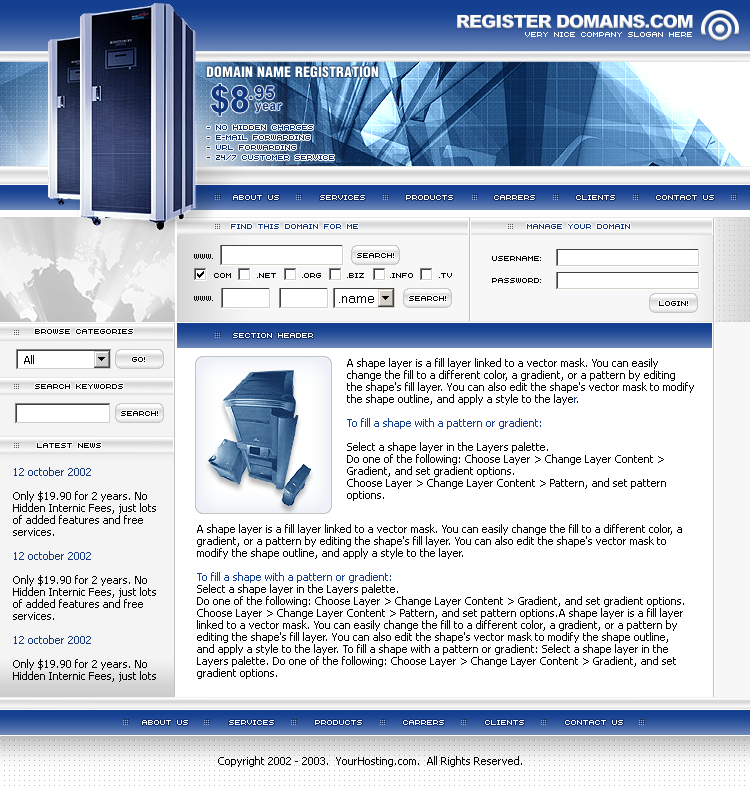
<style>
.page{position:relative;width:750px;height:788px;background:#ffffff}
.page>*{position:absolute;margin:0}
.t1{font:18px "Arial-Black";letter-spacing:-0.05em;color:#ffffff;text-transform:uppercase}
.t2{font:10px "AuXDotBitC";letter-spacing:-0.1em;color:#ffffff;text-transform:uppercase}
.t3{font:14px "Helvetica-Condensed-Black";color:#ffffff;text-transform:uppercase}
.t4{font:36px "Arial-BoldMT";letter-spacing:-0.025em;color:#12377e}
.t5{font:18px "Arial-BoldMT";letter-spacing:0.05em;color:#12377e}
.t6{font:12px "Arial-BoldMT";color:#12377e}
.t7{font:10px/10px "AuXDotBitC";letter-spacing:-0.1em;color:#0a2c6a;text-transform:uppercase}
.t8{font:10px "AuXDotBitC";letter-spacing:-0.1em;color:#12377e;text-transform:uppercase}
.t9{font:10px "AuXDotBitC";letter-spacing:-0.1em;color:#000000;text-transform:uppercase}
.t10{font:10px/22px "AuXDotBitC";letter-spacing:-0.1em;color:#000000;text-transform:uppercase}
.t11{font:11px "Tahoma";color:#000000}
.t12{font:11px/12px "Tahoma";color:#000000}
.t13{font:11px/12px "Tahoma";color:#154091}
.t14{font:11px/12px "Tahoma";color:#143f91}
.t15{font:11px/12px "Tahoma";color:#12377e}
.t16{font:11px/12px "Tahoma";color:#0a4155}
</style>
<div class="page">
<p class="t1" style="left:457px;top:14px;width:236px;height:15px">register domains.com</p>
<p class="t2" style="left:525px;top:32px;width:167px;height:5px">very nice company slogan here</p>
<p class="t3" style="left:206px;top:66px;width:173px;height:12px">domain name registration</p>
<p class="t4" style="left:211px;top:84px;width:38px;height:32px">$8</p>
<p class="t5" style="left:249px;top:86px;width:25px;height:14px">.95</p>
<p class="t6" style="left:255px;top:103px;width:27px;height:10px">year</p>
<p class="t7" style="left:207px;top:125px;width:127px;height:35px">- No hidden charges<br>- E-mail Forwarding<br>- URL Forwarding<br>- 24/7 Customer Service</p>
<p class="t2" style="left:233px;top:195px;width:481px;height:5px">ABOUT US        SERVICES        PRODUCTS        CARRERS        CLIENTS        CONTACT US</p>
<p class="t8" style="left:231px;top:224px;width:127px;height:5px">find this domain for me</p>
<p class="t8" style="left:527px;top:224px;width:103px;height:5px">manage your domain</p>
<p class="t9" style="left:194px;top:254px;width:19px;height:5px">www.</p>
<p class="t9" style="left:357px;top:253px;width:37px;height:5px">search!</p>
<p class="t10" style="left:492px;top:256px;width:49px;height:27px">username:<br>password:</p>
<p class="t9" style="left:212px;top:273px;width:240px;height:5px"><span class="t2">.</span>com     .net     .org     .biz     .info     .tv</p>
<p class="t9" style="left:194px;top:296px;width:19px;height:5px">www.</p>
<p class="t9" style="left:409px;top:296px;width:37px;height:5px">search!</p>
<p class="t9" style="left:659px;top:301px;width:29px;height:5px">LOGIN!</p>
<p class="t9" style="left:35px;top:329px;width:98px;height:5px">browse categories</p>
<p class="t2" style="left:233px;top:333px;width:80px;height:5px">section header</p>
<p class="t11" style="left:24px;top:355px;width:10px;height:9px">All</p>
<p class="t9" style="left:132px;top:357px;width:13px;height:5px">go!</p>
<p class="t12" style="left:347px;top:358px;width:347px;height:143px">A shape layer is a fill layer linked to a vector mask. You can easily change the fill to a different color, a gradient, or a pattern by editing the shape's fill layer. You can also edit the shape's vector mask to modify the shape outline, and apply a style to the laye<span class="t13">r</span>. <br><span class="t14"><br>To fill a shape with a pattern or gradient:<br></span><br>Select a shape layer in the Layers palette.<br>Do one of the following: Choose Layer &gt; Change Layer Content &gt; Gradient, and set gradient options.<br>Choose Layer &gt; Change Layer Content &gt; Pattern, and set pattern options.</p>
<p class="t9" style="left:35px;top:384px;width:88px;height:5px">search keywords</p>
<p class="t9" style="left:121px;top:411px;width:37px;height:5px">search!</p>
<p class="t9" style="left:37px;top:443px;width:64px;height:5px">latest news</p>
<p class="t12" style="left:13px;top:467px;width:143px;height:215px"><span class="t15">12 october 2002<br></span><br>Only $19.90 for 2 years. No Hidden Internic Fees, just lots of added features and free services. <br><br><span class="t15">12 october 2002<br></span><br>Only $19.90 for 2 years. No Hidden Internic Fees, just lots of added features and free services. <br><br><span class="t15">12 october 2002<br></span><br>Only $19.90 for 2 years. No Hidden Internic Fees, just lots of added features and free services.<br><br><span class="t16">12 october 2002<br></span><br>Only $19.90 for 2 years. No Hidden Internic Fees, just lots of added features and free services.</p>
<p class="t12" style="left:197px;top:524px;width:487px;height:155px">A shape layer is a fill layer linked to a vector mask. You can easily change the fill to a different color, a gradient, or a pattern by editing the shape's fill layer. You can also edit the shape's vector mask to modify the shape outline, and apply a style to the layer. <br><br><span class="t14">To fill a shape with a pattern or gradient:<br></span>Select a shape layer in the Layers palette.<br>Do one of the following: Choose Layer &gt; Change Layer Content &gt; Gradient, and set gradient options.<br>Choose Layer &gt; Change Layer Content &gt; Pattern, and set pattern options.A shape layer is a fill layer linked to a vector mask. You can easily change the fill to a different color, a gradient, or a pattern by editing the shape's fill layer. You can also edit the shape's vector mask to modify the shape outline, and apply a style to the layer. To fill a shape with a pattern or gradient: Select a shape layer in the Layers palette. Do one of the following: Choose Layer &gt; Change Layer Content &gt; Gradient, and set gradient options.<br>Choose Layer &gt; Change Layer Content &gt; Pattern, and set pattern options.A shape layer is a fill layer linked to a vector mask. You can easily change the fill to a different color, a gradient, or a pattern by editing the shape's fill layer. You can also edit the shape's vector mask to modify the shape outline, and apply a style to the layer. <br><br>To fill a shape with a pattern or gradient:<br>Select a shape layer in the Layers palette.<br>Do one of the following: Choose Layer &gt; Change Layer Content &gt; Gradient, and set gradient options.<br>Choose Layer &gt; Change Layer Content &gt; Pattern, and set pattern options.</p>
<p class="t2" style="left:142px;top:720px;width:481px;height:5px">ABOUT US        SERVICES        PRODUCTS        CARRERS        CLIENTS        CONTACT US</p>
<p class="t11" style="left:218px;top:756px;width:304px;height:11px">Copyright 2002 - 2003.  YourHosting.com.  All Rights Reserved.</p>
</div>
